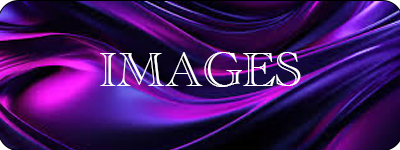
<style>
.page{position:relative;width:400px;height:150px}
.page>*{position:absolute;margin:0}
.t1{font:50px "AcademyEngravedLetPlain";color:#ffffff}
</style>
<div class="page">
<p class="t1" style="left:100px;top:52px;width:201px;height:35px">IMAGES</p>
</div>
